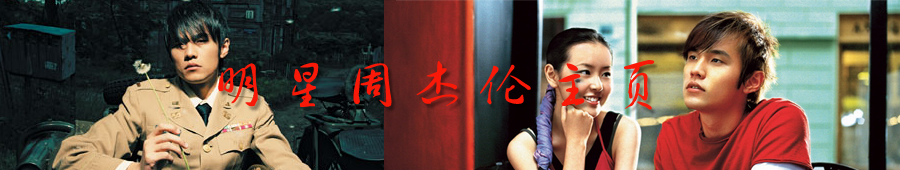
<style>
.page{position:relative;width:900px;height:170px}
.page>*{position:absolute;margin:0}
.t1{font:60px "GJJHCJW--GB1-0";letter-spacing:0.01em;color:#f91908;scale:1.1 1}
</style>
<div class="page">
<p class="t1" style="left:218px;top:60px;width:437px;height:50px">明星周杰伦主页</p>
</div>
